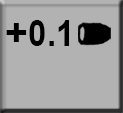
<style>
.page{position:relative;width:123px;height:113px;background:#b2b2b2}
.page>*{position:absolute;margin:0}
.t1{font:36.3px "Arial-BoldMT";color:#000000;scale:0.91 1}
.t2{font:36.3px "Arial-BoldMT";color:#000000;scale:1.07 1}
</style>
<div class="page">
<p class="t1" style="left:6px;top:20px;width:63px;height:26px"><span class="t2">+</span>0.1</p>
</div>
